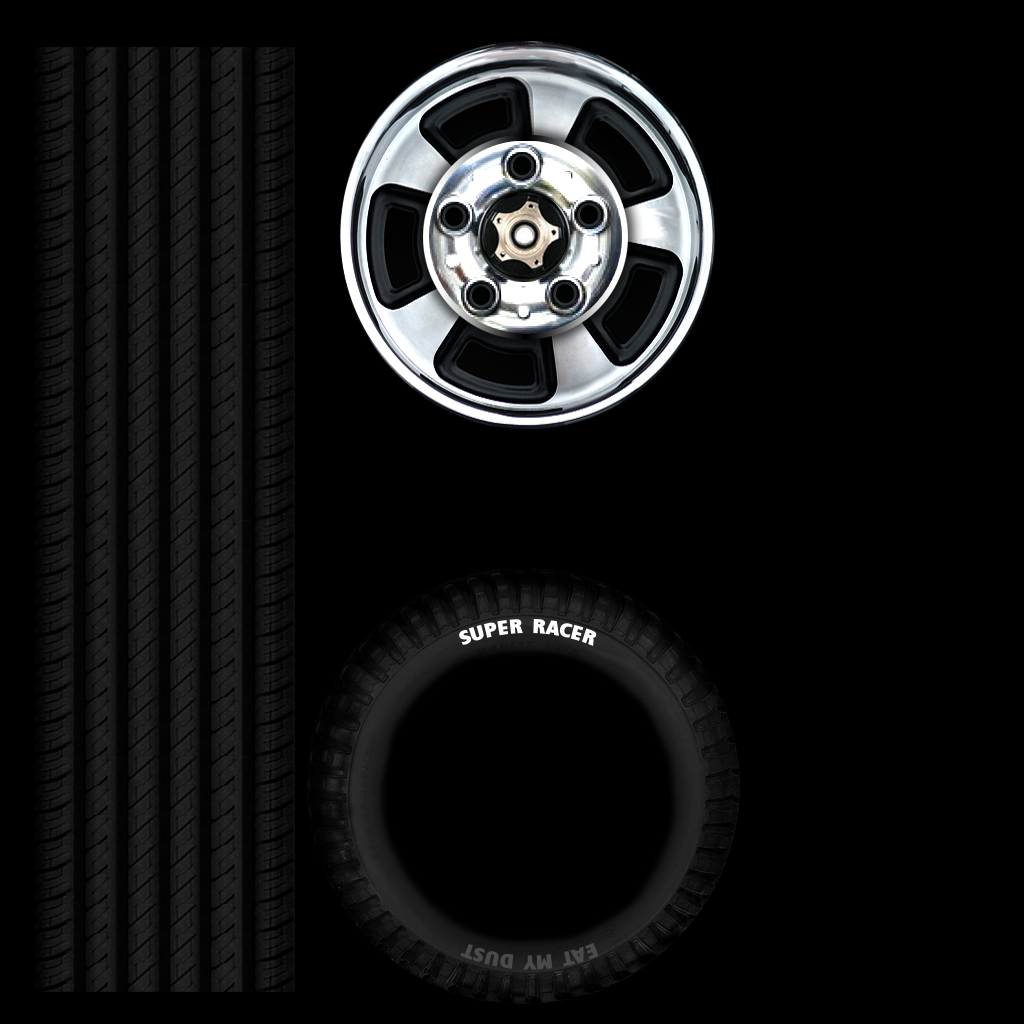
<style>
.page{position:relative;width:1024px;height:1024px;background:#000000}
.page>*{position:absolute;margin:0}
.t1{font:30px "Humanist521BT-XtraBoldCondensed";color:#ffffff;font-variant:small-caps}
.t2{font:30.1px "Humanist521BT-XtraBoldCondensed";color:#494949;font-variant:small-caps}
</style>
<div class="page">
<p class="t1" style="left:459px;top:619px;width:138px;height:27px">super racer</p>
<p class="t2" style="left:460px;top:942px;width:139px;height:28px;rotate:180deg">eat my dust</p>
</div>
